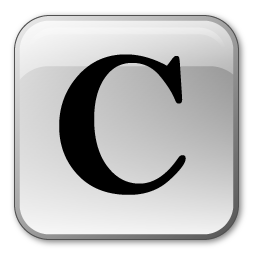
<style>
.page{position:relative;width:256px;height:256px}
.page>*{position:absolute;margin:0}
.t1{font:210px "BellMTBold";color:#000000}
</style>
<div class="page">
<p class="t1" style="left:59px;top:54px;width:127px;height:141px">C</p>
</div>
